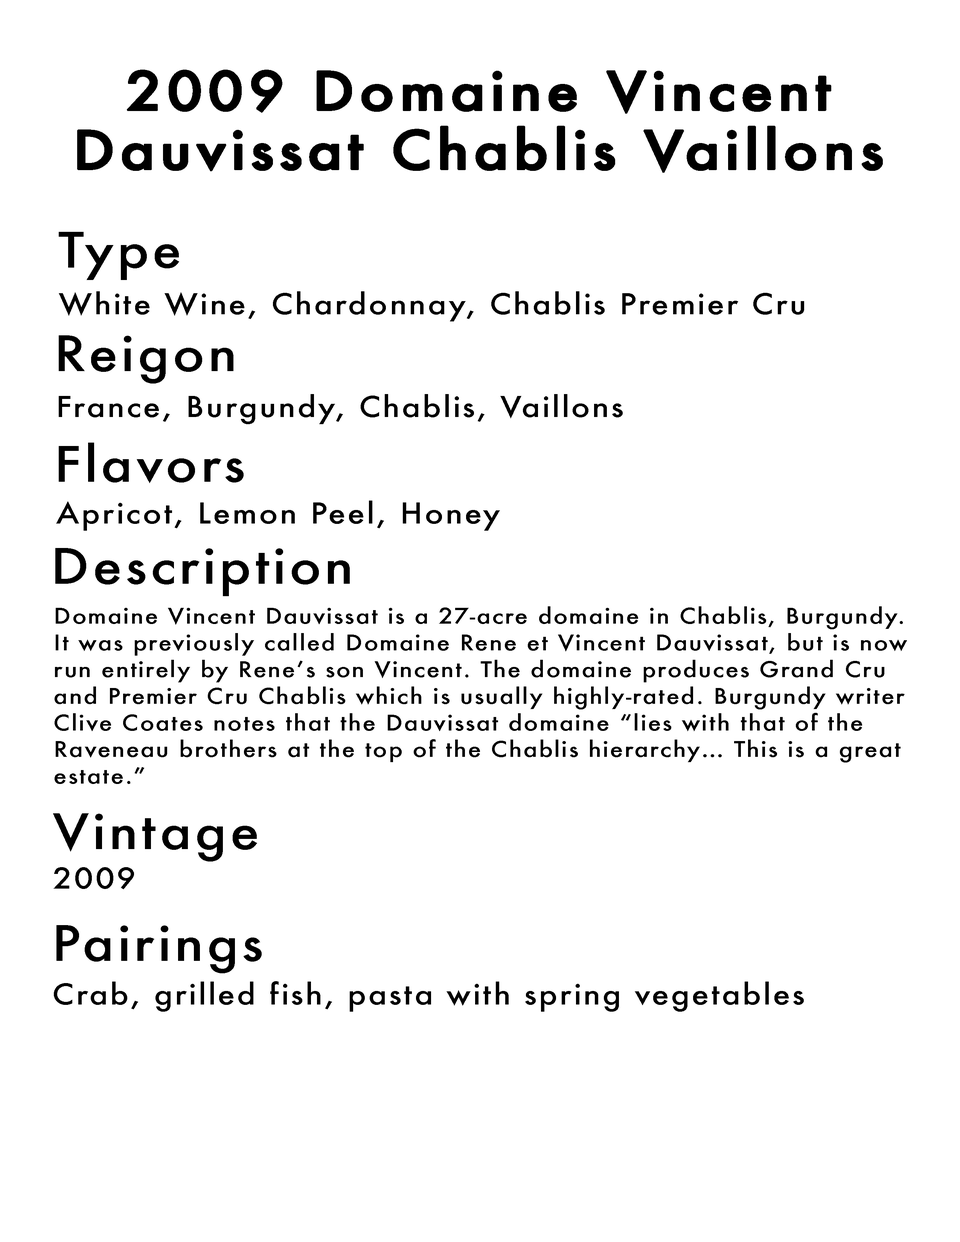
<style>
.page{position:relative;width:960px;height:1242px;background:#ffffff}
.page>*{position:absolute;margin:0}
.t1{font:51.7px/59.1px "Futura-Medium";letter-spacing:0.06em;color:#000000;font-weight:bold;scale:1.12 1}
.t2{font:47.5px "Futura-Medium";letter-spacing:0.06em;color:#000000;scale:1.12 1}
.t3{font:27.9px "Futura-Medium";letter-spacing:0.06em;color:#000000;scale:1.12 1}
.t4{font:20.9px/26.7px "Futura-Medium";letter-spacing:0.06em;color:#000000;scale:1.12 1}
</style>
<div class="page">
<p class="t1" style="left:77px;top:70px;width:806px;height:103px;text-align:center">2009 Domaine Vincent<br>Dauvissat Chablis Vaillons</p>
<p class="t2" style="left:59px;top:232px;width:120px;height:48px">Type</p>
<p class="t3" style="left:59px;top:291px;width:745px;height:30px">White Wine, Chardonnay, Chablis Premier Cru</p>
<p class="t2" style="left:59px;top:335px;width:174px;height:49px">Reigon</p>
<p class="t3" style="left:59px;top:394px;width:564px;height:30px">France, Burgundy, Chablis, Vaillons</p>
<p class="t2" style="left:59px;top:443px;width:185px;height:40px">Flavors</p>
<p class="t3" style="left:56px;top:501px;width:444px;height:30px">Apricot, Lemon Peel, Honey</p>
<p class="t2" style="left:55px;top:548px;width:295px;height:48px">Description</p>
<p class="t4" style="left:55px;top:606px;width:852px;height:178px">Domaine Vincent Dauvissat is a 27-acre domaine in Chablis, Burgundy.<br>It was previously called Domaine Rene et Vincent Dauvissat, but is now<br>run entirely by Rene’s son Vincent. The domaine produces Grand Cru<br>and Premier Cru Chablis which is usually highly-rated. Burgundy writer<br>Clive Coates notes that the Dauvissat domaine “lies with that of the<br>Raveneau brothers at the top of the Chablis hierarchy… This is a great<br>estate.”</p>
<p class="t2" style="left:53px;top:813px;width:204px;height:49px">Vintage</p>
<p class="t3" style="left:53px;top:867px;width:81px;height:23px">2009</p>
<p class="t2" style="left:56px;top:925px;width:206px;height:48px">Pairings</p>
<p class="t3" style="left:54px;top:981px;width:750px;height:31px">Crab, grilled fish, pasta with spring vegetables</p>
</div>
